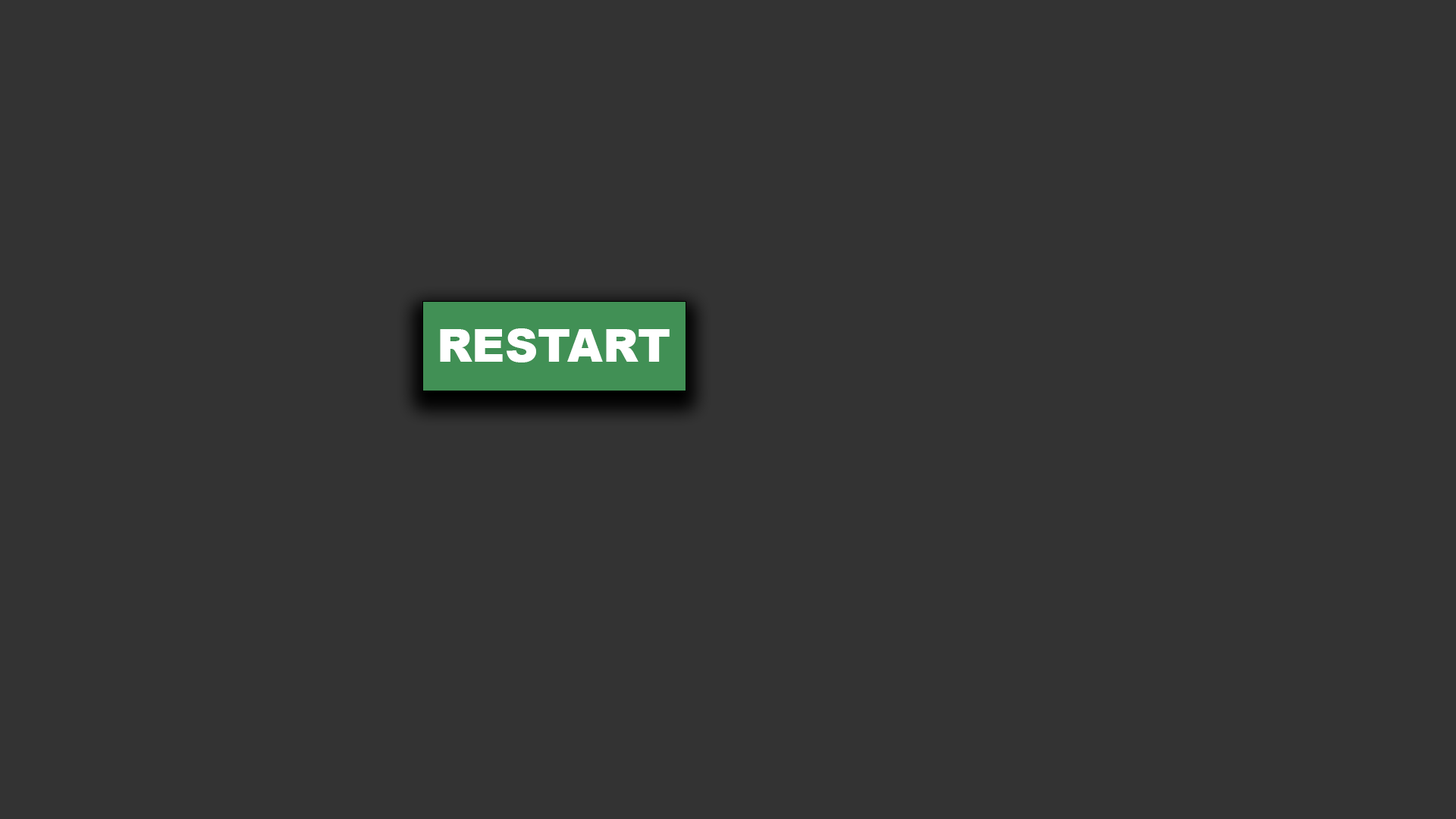
<style>
.page{position:relative;width:1456px;height:819px;background:#333333}
.page>*{position:absolute;margin:0}
.t1{font:45.5px "Arial-Black";color:#ffffff}
</style>
<div class="page">
<p class="t1" style="left:440px;top:328px;width:230px;height:34px">RESTART</p>
</div>
